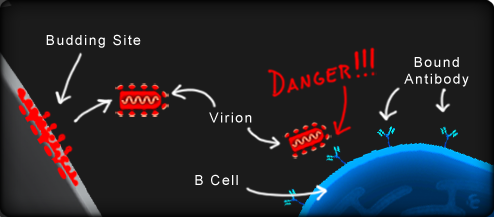
<style>
.page{position:relative;width:494px;height:217px;background:#1b1b1b}
.page>*{position:absolute;margin:0}
.t1{font:14px "ArialMT";letter-spacing:0.1em;color:#ffffff}
</style>
<div class="page">
<p class="t1" style="left:46px;top:34px;width:95px;height:14px">Budding Site</p>
<p class="t1" style="left:404px;top:57px;width:65px;height:30px;text-align:center">Bound<br>Antibody</p>
<p class="t1" style="left:209px;top:112px;width:43px;height:11px">Virion</p>
<p class="t1" style="left:195px;top:174px;width:43px;height:12px">B Cell</p>
</div>
